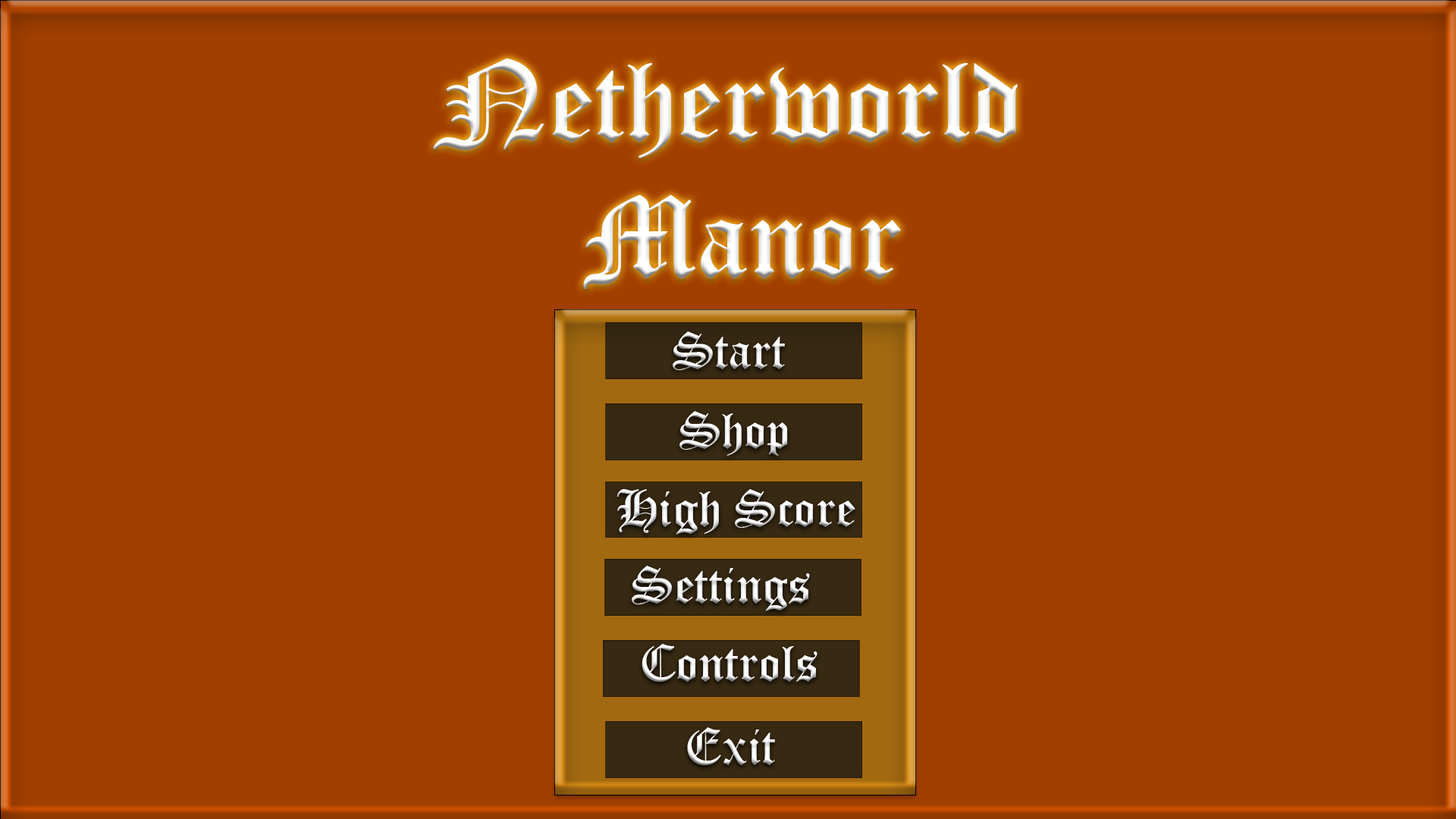
<style>
.page{position:relative;width:1456px;height:819px;background:#a23f00}
.page>*{position:absolute;margin:0}
.t1{font:113.7px "OldEnglishTextMT";color:#ffffff}
.t2{font:50.6px "OldEnglishTextMT";color:#ffffff}
</style>
<div class="page">
<p class="t1" style="left:433px;top:58px;width:585px;height:231px;text-align:center">Netherworld<br> Manor</p>
<p class="t2" style="left:617px;top:489px;width:238px;height:46px">High Score</p>
<p class="t2" style="left:632px;top:566px;width:178px;height:45px">Settings</p>
<p class="t2" style="left:642px;top:644px;width:175px;height:38px">Controls</p>
</div>
